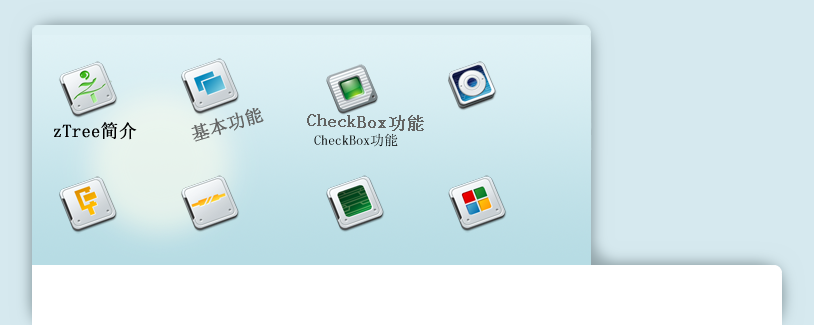
<style>
.page{position:relative;width:814px;height:325px;background:#d6e9ef}
.page>*{position:absolute;margin:0}
.t1{font:18px "SimSun";color:#636463;font-weight:bold}
.t2{font:18px "SimSun";color:#000000;font-weight:bold}
.t3{font:14px "SimSun";color:#000000}
</style>
<div class="page">
<p class="t1" style="left:191px;top:108px;width:73px;height:34px;rotate:-16deg">基本功能</p>
<p class="t2" style="left:54px;top:122px;width:83px;height:18px">zTree简介</p>
<p class="t1" style="left:307px;top:114px;width:117px;height:17px;rotate:2deg">CheckBox功能</p>
<p class="t3" style="left:314px;top:133px;width:84px;height:14px">CheckBox功能</p>
</div>
